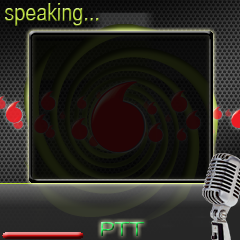
<style>
.page{position:relative;width:240px;height:240px}
.page>*{position:absolute;margin:0}
.t1{font:24px "HelveticaCYPlain"}
.t2{font:18px "TradeGothicLH-Extended"}
</style>
<div class="page">
<p class="t1" style="left:5px;top:3px;width:94px;height:23px">speaking...</p>
<p class="t2" style="left:101px;top:222px;width:44px;height:14px">PTT</p>
</div>
